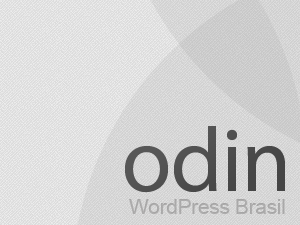
<style>
.page{position:relative;width:300px;height:225px}
.page>*{position:absolute;margin:0}
.t1{font:127.2px "MyriadArabic-Regular";letter-spacing:-0.01em;color:#464646}
.t2{font:20.7px "ArialMT";letter-spacing:-0.01em;color:#9a9999}
</style>
<div class="page">
<p class="t1" style="left:125px;top:126px;width:160px;height:67px">odin</p>
<p class="t2" style="left:129px;top:199px;width:156px;height:15px;opacity:0.68">WordPress Brasil</p>
</div>
